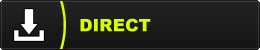
<style>
.page{position:relative;width:260px;height:50px}
.page>*{position:absolute;margin:0}
.t1{font:17px "Arial-Black";letter-spacing:0.01em;color:#d5ff00}
</style>
<div class="page">
<p class="t1" style="left:80px;top:18px;width:71px;height:14px">DIRECT</p>
</div>
